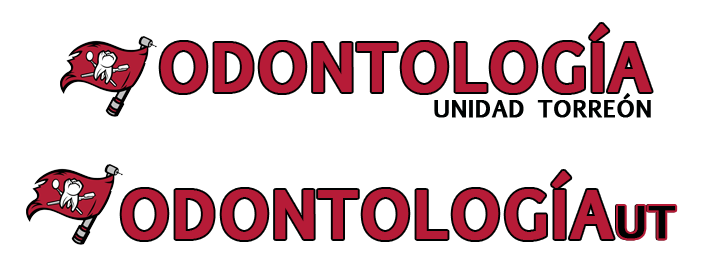
<style>
.page{position:relative;width:701px;height:280px;background:#ffffff}
.page>*{position:absolute;margin:0}
.t1{font:62.5px "EuphemiaUCAS-Bold";color:#b61b37;font-weight:bold}
.t2{font:22.8px "EuphemiaUCAS-Bold";color:#000202;font-weight:bold}
.t3{font:41.7px "EuphemiaUCAS-Bold";color:#000202;font-weight:bold}
</style>
<div class="page">
<p class="t1" style="left:160px;top:24px;width:492px;height:69px">ODONTOLOGÍA</p>
<p class="t2" style="left:434px;top:93px;width:217px;height:25px">UNIDAD TORREÓN</p>
<p class="t1" style="left:121px;top:171px;width:554px;height:69px">ODONTOLOGÍA<span class="t3">UT</span></p>
<p class="t3" style="left:618px;top:206px;width:58px;height:33px">UT</p>
</div>
